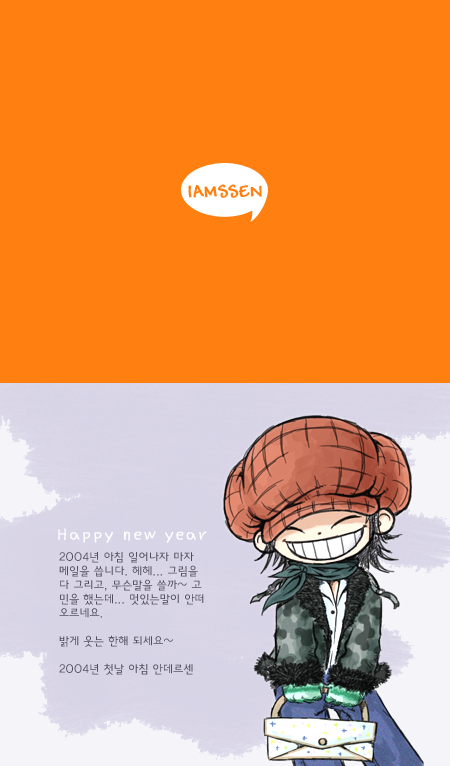
<style>
.page{position:relative;width:450px;height:766px;background:#ff8010}
.page>*{position:absolute;margin:0}
.t1{font:18px "Andy-Bold";letter-spacing:0.01em;color:#ff8010;font-weight:bold}
.t2{font:18px "YDSDJ";letter-spacing:0.01em;color:#ffffff;font-weight:bold}
.t3{font:12px/14px "YDIYGO220-KSCpc-EUC-H";letter-spacing:-0.15em;color:#514e5e}
</style>
<div class="page">
<p class="t1" style="left:188px;top:184px;width:74px;height:14px">IAMSSEN</p>
<p class="t2" style="left:58px;top:528px;width:149px;height:15px">Happy new year</p>
<p class="t3" style="left:59px;top:551px;width:145px;height:124px">2004년 아침 일어나자 마자 메일을 씁니다. 헤헤... 그림을 다 그리고, 무슨말을 쓸까~ 고민을 했는데... 멋있는말이 안떠오르네요.<br><br>밝게 웃는 한해 되세요~<br><br>2004년 첫날 아침 안데르센</p>
</div>
